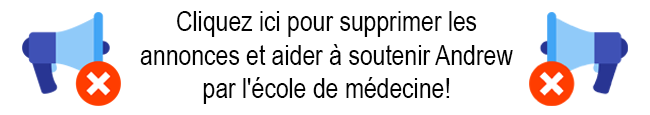
<style>
.page{position:relative;width:650px;height:115px;background:#ffffff}
.page>*{position:absolute;margin:0}
.t1{font:28px "ArialNarrow";color:#030303}
</style>
<div class="page">
<p class="t1" style="left:140px;top:11px;width:373px;height:93px;text-align:center">Cliquez ici pour supprimer les <br>annonces et aider à soutenir Andrew<br>par l'école de médecine!</p>
</div>
